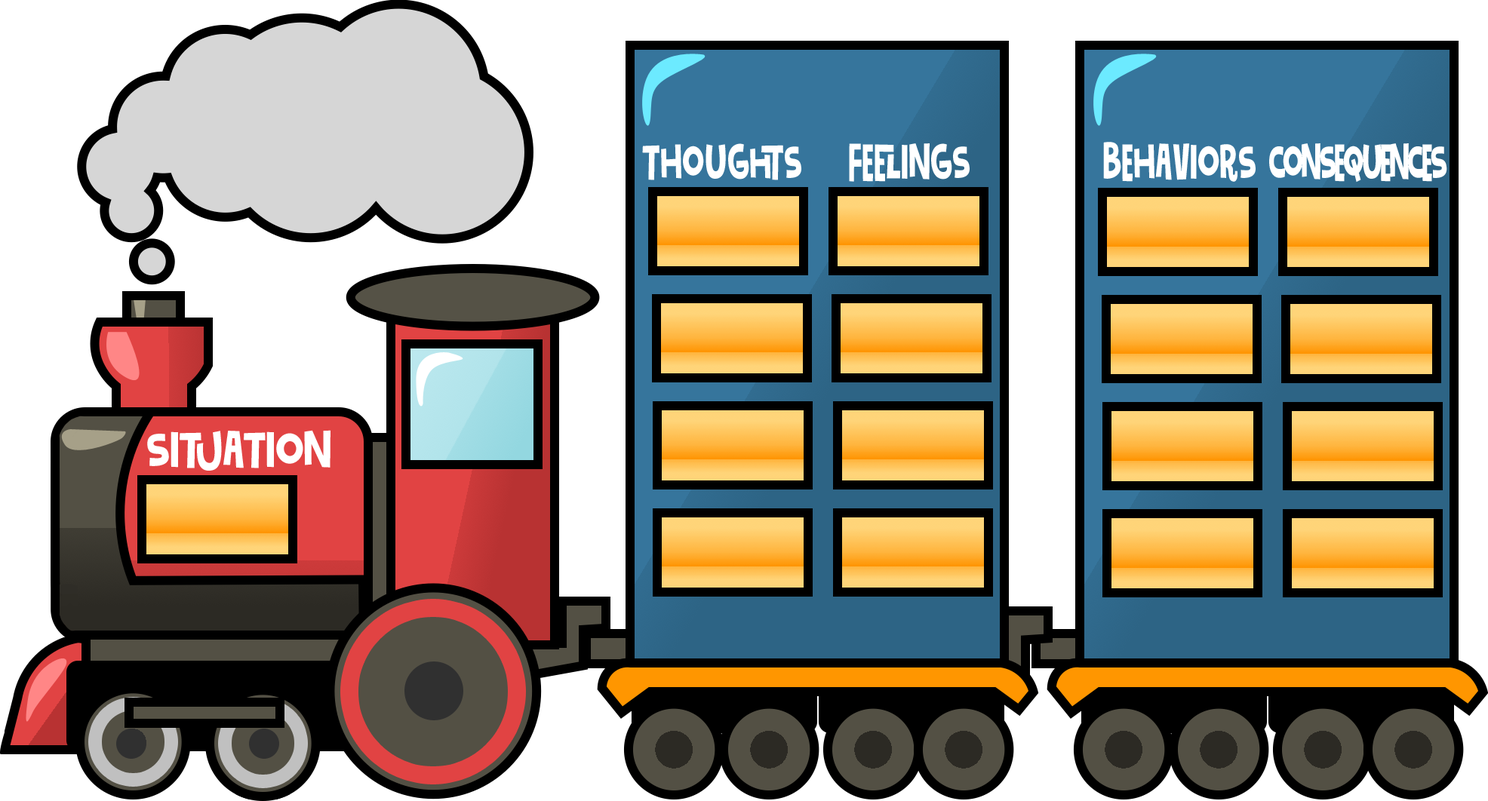
<style>
.page{position:relative;width:1488px;height:801px;background:#ffffff}
.page>*{position:absolute;margin:0}
.t1{font:46.6px "Gumbutcha";color:#ffffff;scale:0.69 1}
.t2{font:46.6px "Gumbutcha";letter-spacing:-0.075em;color:#ffffff;scale:0.64 1}
.t3{font:48px "Gumbutcha";color:#ffffff;scale:0.87 1}
</style>
<div class="page">
<p class="t1" style="left:642px;top:143px;width:159px;height:37px">Thoughts</p>
<p class="t1" style="left:849px;top:143px;width:121px;height:39px">Feelings</p>
<p class="t1" style="left:1103px;top:142px;width:153px;height:40px">BEHAVIORS</p>
<p class="t2" style="left:1269px;top:143px;width:178px;height:40px">CONSEQUENCES</p>
<p class="t3" style="left:147px;top:430px;width:184px;height:41px">Situation</p>
</div>
